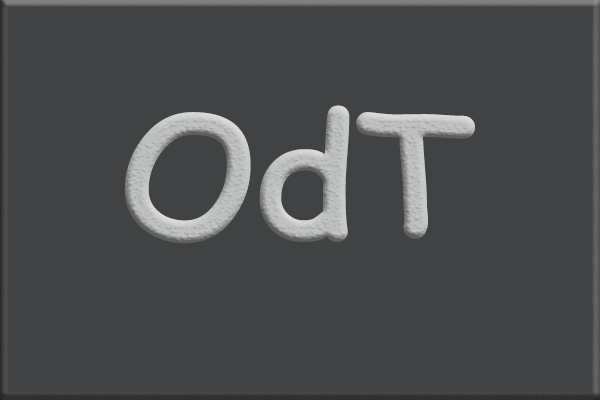
<style>
.page{position:relative;width:600px;height:400px;background:#414243}
.page>*{position:absolute;margin:0}
.t1{font:170px "ComicSansMS-Bold";color:#bcc0c1}
</style>
<div class="page">
<p class="t1" style="left:124px;top:105px;width:351px;height:139px">OdT</p>
</div>
